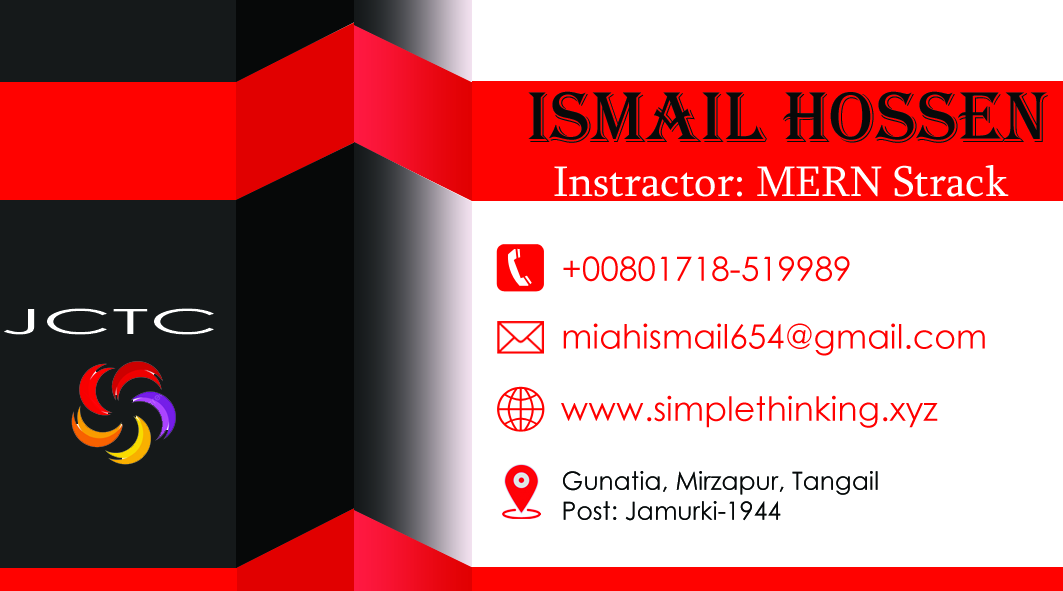
<style>
.page{position:relative;width:1063px;height:591px;background:#ffffff}
.page>*{position:absolute;margin:0}
.t1{font:74.1px "Algerian";color:#070909}
.t2{font:44.1px "Sylfaen";color:#ffffff}
.t3{font:33.3px "CenturyGothic";color:#ff0000}
.t4{font:34.6px "CenturyGothic";color:#ffffff;scale:2.5 1}
.t5{font:25px "CenturyGothic";color:#070909}
</style>
<div class="page">
<p class="t1" style="left:528px;top:91px;width:520px;height:52px">Ismail Hossen</p>
<p class="t2" style="left:554px;top:165px;width:455px;height:32px">Instractor: MERN Strack</p>
<p class="t3" style="left:563px;top:256px;width:287px;height:26px">+00801718-519989</p>
<p class="t4" style="left:4px;top:308px;width:210px;height:27px">JCTC</p>
<p class="t3" style="left:563px;top:323px;width:422px;height:33px">miahismail654@gmail.com</p>
<p class="t3" style="left:561px;top:395px;width:377px;height:33px">www.simplethinking.xyz</p>
<p class="t5" style="left:563px;top:471px;width:315px;height:50px">Gunatia, Mirzapur, Tangail<br>Post: Jamurki-1944</p>
</div>
